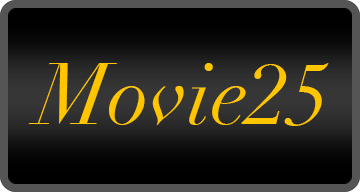
<style>
.page{position:relative;width:360px;height:192px}
.page>*{position:absolute;margin:0}
.t1{font:85px "Didot-Italic";color:#ffc600}
</style>
<div class="page">
<p class="t1" style="left:28px;top:63px;width:301px;height:63px">Movie25</p>
</div>
